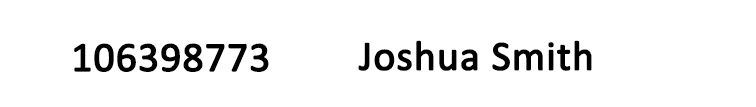
<style>
.page{position:relative;width:756px;height:107px;background:#ffffff}
.page>*{position:absolute;margin:0}
.t1{font:41.7px "Calibri";color:#000000;font-weight:bold}
</style>
<div class="page">
<p class="t1" style="left:358px;top:40px;width:234px;height:31px">Joshua Smith</p>
<p class="t1" style="left:74px;top:43px;width:195px;height:29px">106398773</p>
</div>
